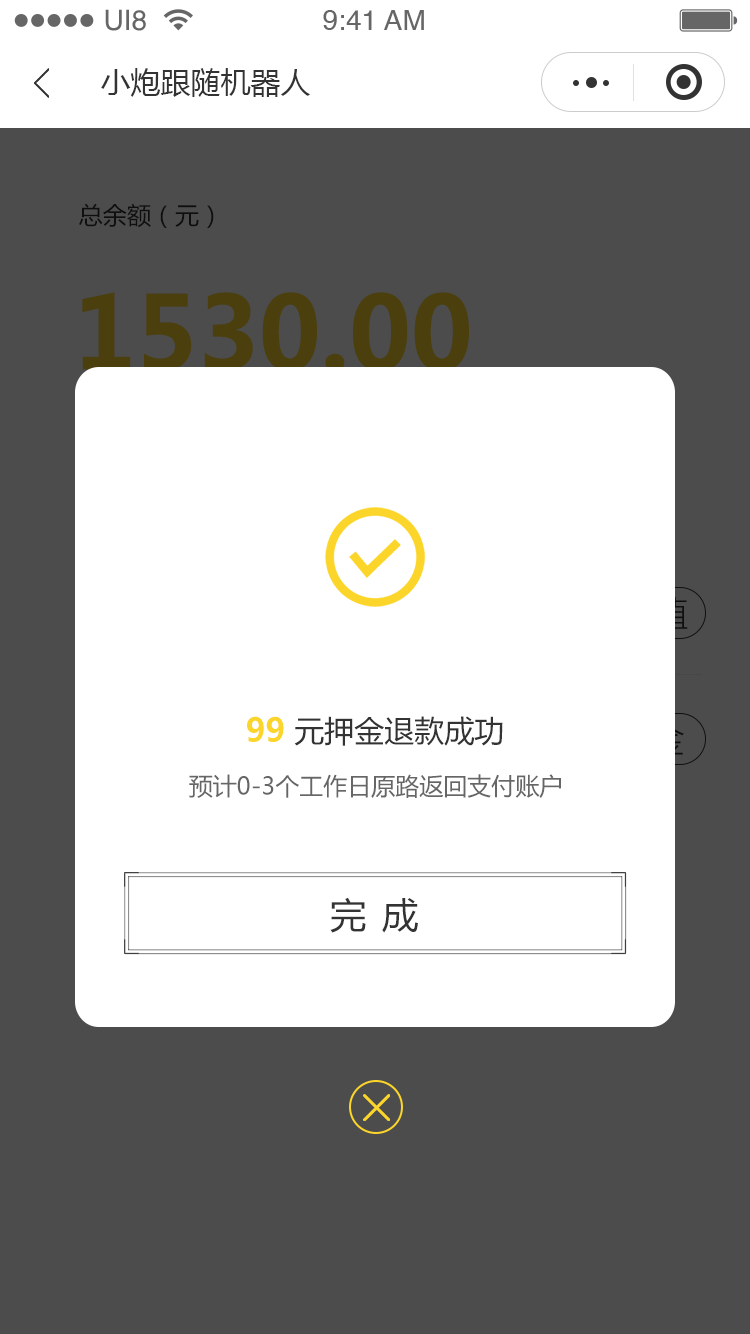
<style>
.page{position:relative;width:750px;height:1334px;background:#4c4c4c}
.page>*{position:absolute;margin:0}
.t1{font:28.1px "Helvetica";color:#666666}
.t2{font:30px "MicrosoftYaHei";color:#333333}
.t3{font:32px "MicrosoftYaHei-Bold";color:#fbd52a}
.t4{font:24px "MicrosoftYaHei";color:#666666}
.t5{font:36px "MicrosoftYaHei";letter-spacing:0.44em;color:#333333}
</style>
<div class="page">
<p class="t1" style="left:105px;top:9px;width:41px;height:22px">UI8</p>
<p class="t1" style="left:323px;top:10px;width:101px;height:20px">9:41 AM</p>
<p class="t2" style="left:101px;top:68px;width:210px;height:29px">小炮跟随机器人</p>
<p class="t2" style="left:247px;top:716px;width:256px;height:30px"><span class="t3">99 </span>元押金退款成功</p>
<p class="t4" style="left:189px;top:774px;width:372px;height:24px">预计0-3个工作日原路返回支付账户</p>
<p class="t5" style="left:330px;top:897px;width:88px;height:36px">完成</p>
</div>
